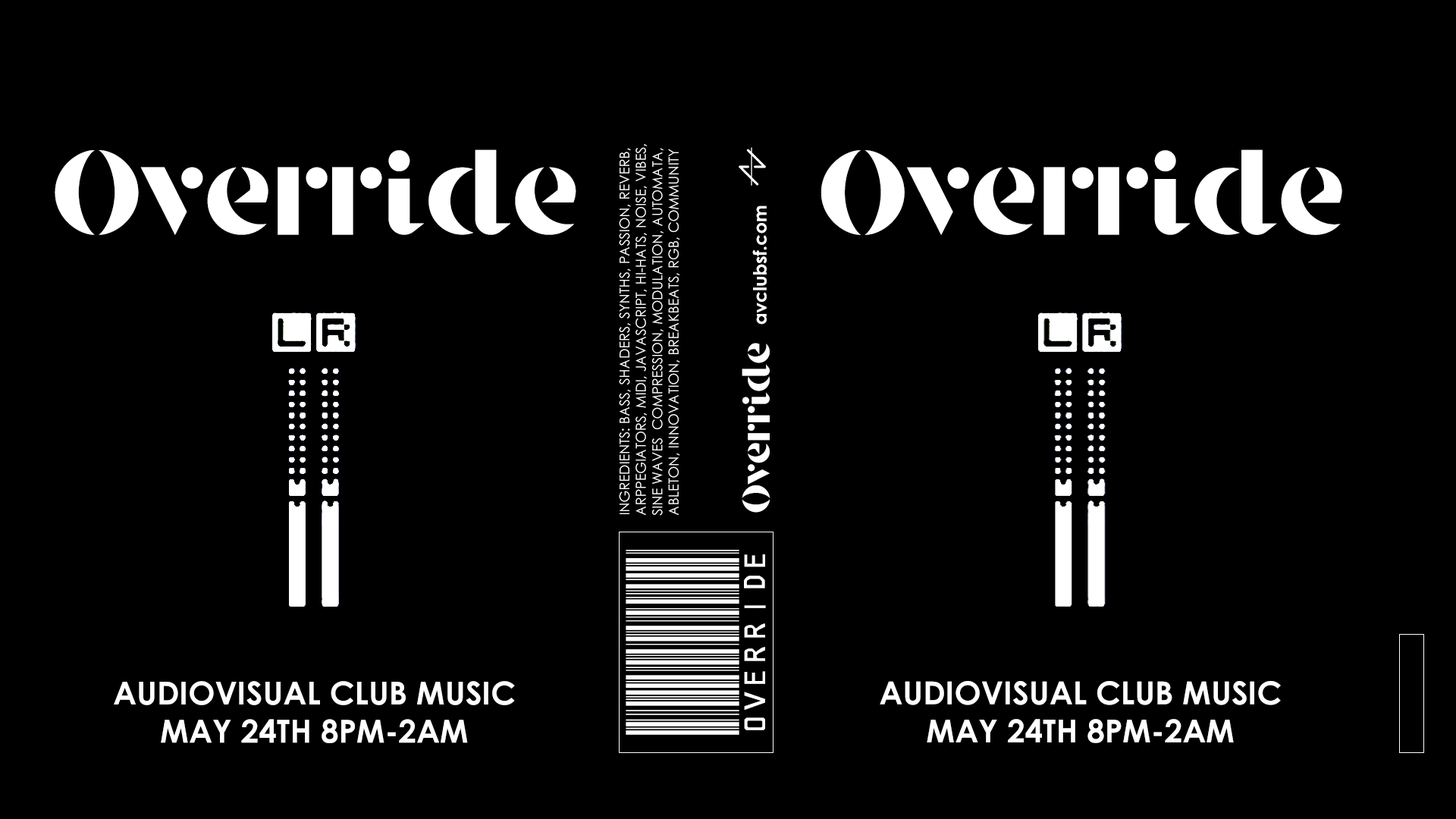
<style>
.page{position:relative;width:1456px;height:819px;background:#000000}
.page>*{position:absolute;margin:0}
.t1{font:140.3px "StanleyRegular";color:#ffffff}
.t2{font:13.6px "CenturyGothic";color:#fffffe}
.t3{font:140.2px "StanleyRegular";color:#ffffff}
.t4{font:18.2px "CenturyGothic-Bold";color:#fffffe}
.t5{font:45.5px "StanleyRegular";color:#ffffff}
.t6{font:140.3px "barcodefont";color:#ffffff}
.t7{font:31.7px "CenturyGothic-Bold";color:#fffffe}
</style>
<div class="page">
<p class="t1" style="left:55px;top:149px;width:521px;height:86px">Override</p>
<p class="t2" style="left:619px;top:144px;width:61px;height:372px;rotate:-90deg">INGREDIENTS: BASS, SHADERS, SYNTHS, PASSION, REVERB,<br>ARPPEGIATORS, MIDI, JAVASCRIPT, HI-HATS, NOISE, VIBES,<br>SINE WAVES  COMPRESSION, MODULATION, AUTOMATA,<br>ABLETON, INNOVATION, BREAKBEATS, RGB, COMMUNITY</p>
<p class="t3" style="left:821px;top:149px;width:521px;height:86px">Override</p>
<p class="t4" style="left:752px;top:206px;width:15px;height:119px;rotate:-90deg">avclubsf.com</p>
<p class="t5" style="left:742px;top:343px;width:28px;height:170px;rotate:-90deg">Override</p>
<p class="t6" style="left:626px;top:550px;width:140px;height:185px;rotate:-90deg">OVERRIDE</p>
<p class="t7" style="left:114px;top:681px;width:401px;height:62px;text-align:center">AUDIOVISUAL CLUB MUSIC<br>MAY 24TH 8PM-2AM</p>
<p class="t7" style="left:880px;top:681px;width:401px;height:62px;text-align:center">AUDIOVISUAL CLUB MUSIC<br>MAY 24TH 8PM-2AM</p>
</div>
